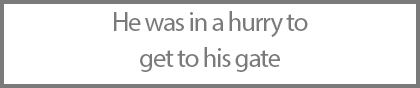
<style>
.page{position:relative;width:420px;height:88px;background:#ffffff}
.page>*{position:absolute;margin:0}
.t1{font:27px/36px "MyriadPro-Regular";letter-spacing:-0.05em;color:#7a7a7a}
</style>
<div class="page">
<p class="t1" style="left:114px;top:11px;width:194px;height:61px;text-align:center">He was in a hurry to <br>get to his gate</p>
</div>
